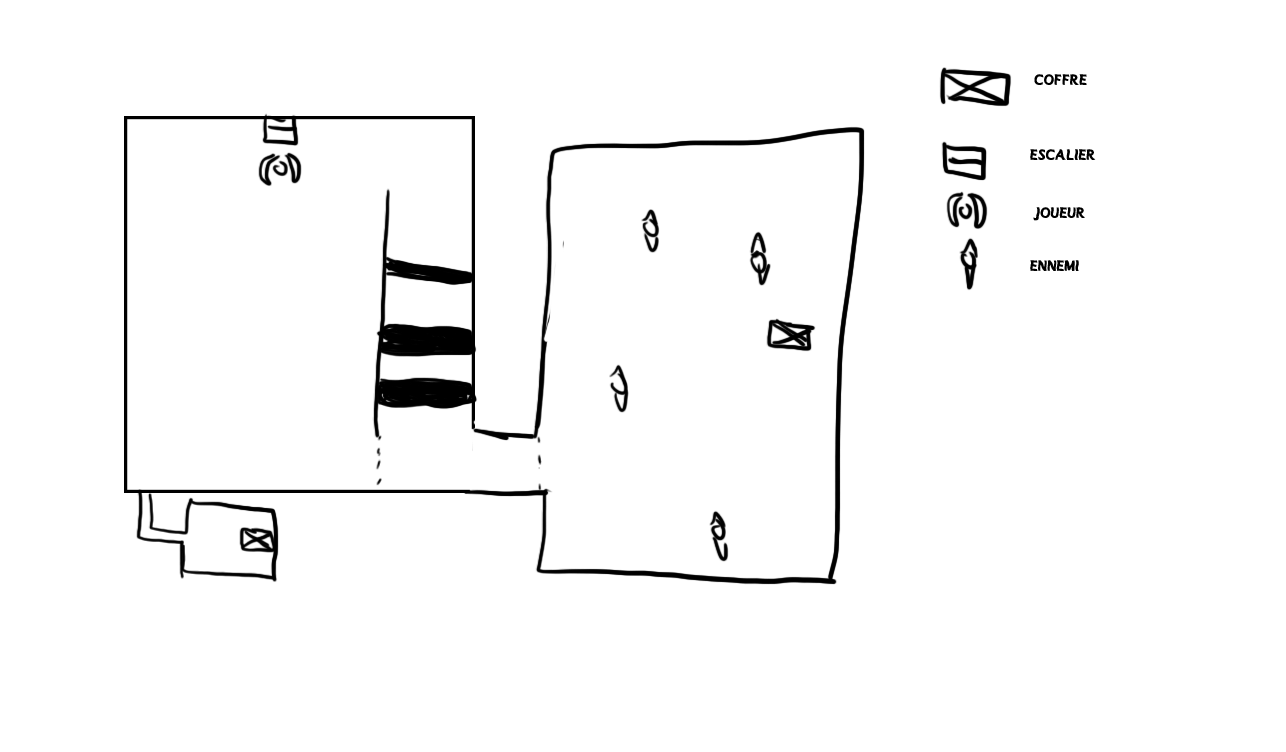
<style>
.page{position:relative;width:1286px;height:752px;background:#ffffff}
.page>*{position:absolute;margin:0}
.t1{font:15.4px "MANOLETE";color:#000000}
</style>
<div class="page">
<p class="t1" style="left:1034px;top:74px;width:53px;height:11px">Coffre</p>
<p class="t1" style="left:1030px;top:149px;width:66px;height:11px">escalier</p>
<p class="t1" style="left:1033px;top:207px;width:52px;height:14px">Joueur</p>
<p class="t1" style="left:1030px;top:260px;width:49px;height:11px">ennemi</p>
</div>
